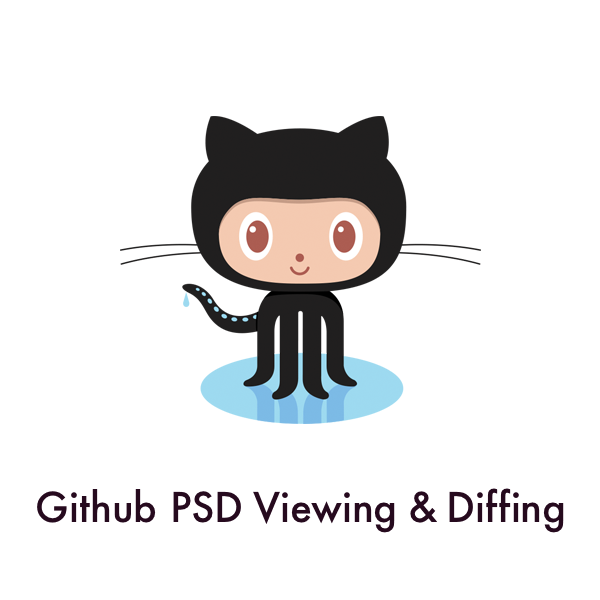
<style>
.page{position:relative;width:600px;height:600px;background:#ffffff}
.page>*{position:absolute;margin:0}
.t1{font:40px "Futura-Medium";color:#260a1e}
.t2{font:40px "Futura-Medium";letter-spacing:-0.04em;color:#260a1e}
</style>
<div class="page">
<p class="t1" style="left:37px;top:488px;width:527px;height:45px">Github PSD Viewing<span class="t2"> &amp; </span>Diffing</p>
</div>
